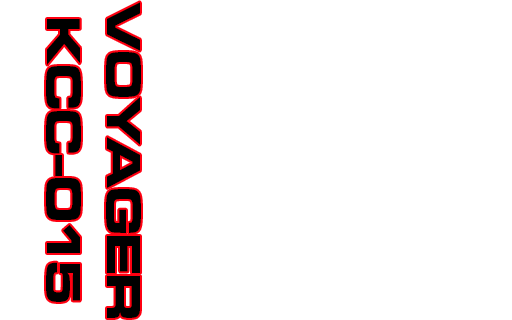
<style>
.page{position:relative;width:512px;height:320px;background:#ffffff}
.page>*{position:absolute;margin:0}
.t1{font:50px "MicrogrammaD-BoldExte";color:#000000}
</style>
<div class="page">
<p class="t1" style="left:46px;top:2px;width:95px;height:316px;text-align:center;rotate:90deg">VOYAGER<br>KCC-015</p>
</div>
